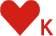
<style>
.page{position:relative;width:56px;height:36px;background:#ffffff}
.page>*{position:absolute;margin:0}
.t1{font:23.4px "MyriadPro-Regular";letter-spacing:-0.1em;color:#d22018;font-weight:bold}
</style>
<div class="page">
<p class="t1" style="left:41px;top:19px;width:12px;height:17px">K</p>
</div>
